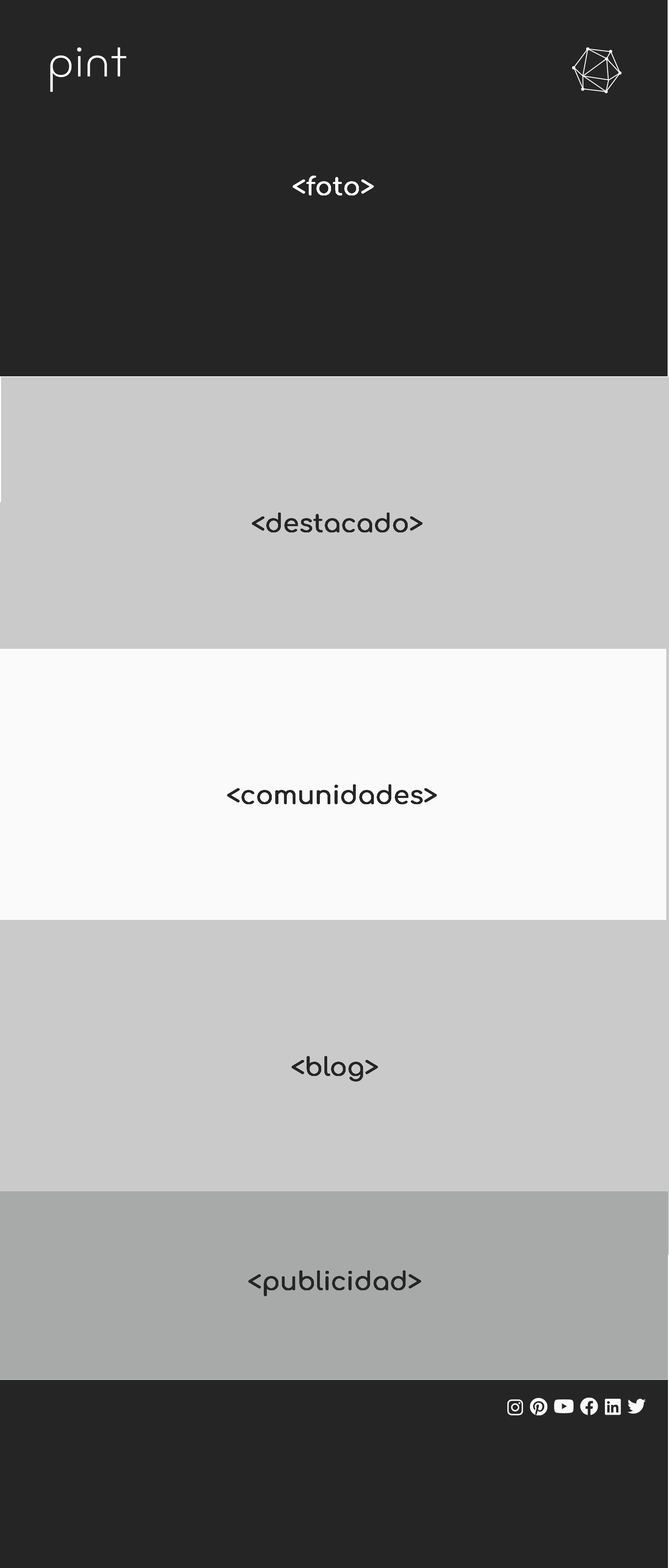
<style>
.page{position:relative;width:669px;height:1568px;background:#252525}
.page>*{position:absolute;margin:0}
.t1{font:25.1px "Comfortaa-Medium";letter-spacing:-0.01em;color:#fafafa;font-weight:bold}
.t2{font:25.1px "Comfortaa-Medium";letter-spacing:-0.01em;color:#252525;font-weight:bold}
</style>
<div class="page">
<p class="t1" style="left:293px;top:176px;width:81px;height:19px">&lt;foto&gt;</p>
<p class="t2" style="left:252px;top:513px;width:171px;height:19px">&lt;destacado&gt;</p>
<p class="t2" style="left:227px;top:784px;width:210px;height:20px">&lt;comunidades&gt;</p>
<p class="t2" style="left:292px;top:1056px;width:86px;height:26px">&lt;blog&gt;</p>
<p class="t2" style="left:248px;top:1270px;width:173px;height:26px">&lt;publicidad&gt;</p>
</div>
